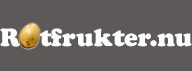
<style>
.page{position:relative;width:192px;height:71px;background:#5e5959}
.page>*{position:absolute;margin:0}
.t1{font:26px "CooperBlack";color:#ffffff}
</style>
<div class="page">
<p class="t1" style="left:0px;top:28px;width:192px;height:19px">R   tfrukter.nu</p>
</div>
